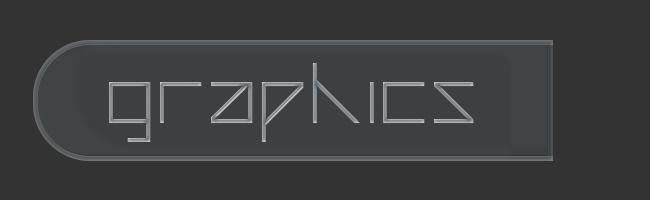
<style>
.page{position:relative;width:650px;height:200px;background:#333333}
.page>*{position:absolute;margin:0}
.t1{font:120px "AuricomRegular";letter-spacing:0.05em}
</style>
<div class="page">
<p class="t1" style="left:109px;top:63px;width:365px;height:79px">graphics</p>
</div>
